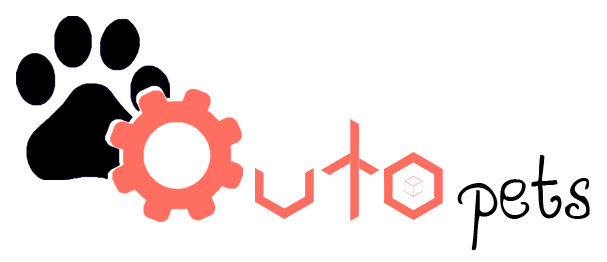
<style>
.page{position:relative;width:607px;height:262px;background:#ffffff}
.page>*{position:absolute;margin:0}
.t1{font:80px "Cubic";color:#ff6f61}
.t2{font:80px "AirplanesintheNightSky";color:#000000}
</style>
<div class="page">
<p class="t1" style="left:255px;top:119px;width:188px;height:102px">uto</p>
<p class="t2" style="left:457px;top:155px;width:133px;height:96px">pets</p>
</div>
